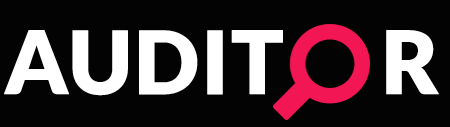
<style>
.page{position:relative;width:450px;height:127px;background:#030303}
.page>*{position:absolute;margin:0}
.t1{font:87px "Lato-Black";color:#ffffff;font-weight:bold}
</style>
<div class="page">
<p class="t1" style="left:4px;top:30px;width:435px;height:66px">AUDIT     R</p>
</div>
